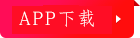
<style>
.page{position:relative;width:140px;height:38px;background:#ff0d25}
.page>*{position:absolute;margin:0}
.t1{font:18px "AdobeFangsongStd-Regular";letter-spacing:0.1em;color:#ffffff;text-transform:uppercase}
</style>
<div class="page">
<p class="t1" style="left:19px;top:9px;width:75px;height:18px">APP下载</p>
</div>
